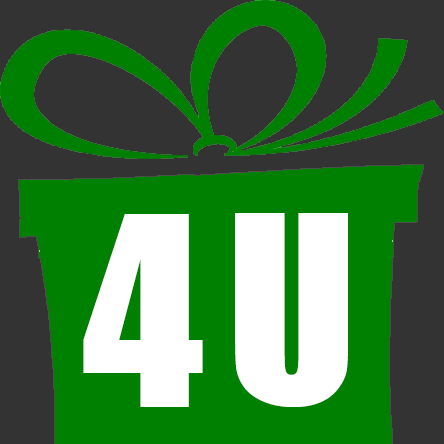
<style>
.page{position:relative;width:444px;height:444px;background:#008000}
.page>*{position:absolute;margin:0}
.t1{font:244px "Impact";color:#ffffff}
.t2{font:240px "Impact";color:#ffffff}
</style>
<div class="page">
<p class="t1" style="left:83px;top:214px;width:120px;height:193px">4</p>
<p class="t2" style="left:235px;top:213px;width:113px;height:194px">U</p>
</div>
